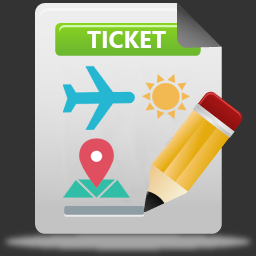
<style>
.page{position:relative;width:256px;height:256px;background:#333333}
.page>*{position:absolute;margin:0}
.t1{font:24px "SegoeUI-Bold";color:#ffffff}
</style>
<div class="page">
<p class="t1" style="left:87px;top:31px;width:79px;height:17px">TICKET</p>
</div>
